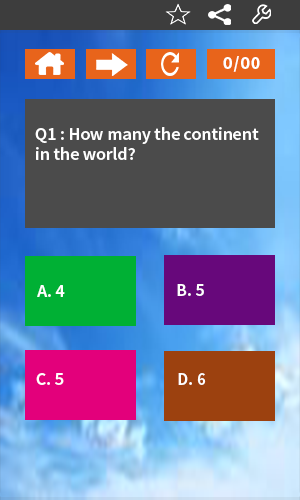
<style>
.page{position:relative;width:300px;height:500px}
.page>*{position:absolute;margin:0}
.t1{font:18px "SourceSansPro-Bold";letter-spacing:0.05em;color:#ffffff}
.t2{font:18px/20px "SourceSansPro-Semibold";color:#ffffff}
.t3{font:18px "SourceSansPro-Semibold";color:#ffffff}
</style>
<div class="page">
<p class="t1" style="left:223px;top:56px;width:37px;height:16px">0/00</p>
<p class="t2" style="left:35px;top:127px;width:224px;height:33px">Q1 : How many the continent in the world?</p>
<p class="t3" style="left:37px;top:285px;width:28px;height:12px">A. 4</p>
<p class="t3" style="left:177px;top:284px;width:27px;height:12px">B. 5</p>
<p class="t3" style="left:36px;top:373px;width:28px;height:12px">C. 5</p>
<p class="t3" style="left:178px;top:373px;width:28px;height:12px">D. 6</p>
</div>
